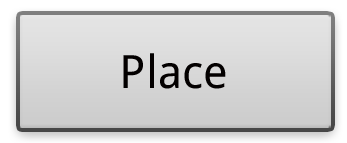
<style>
.page{position:relative;width:347px;height:143px}
.page>*{position:absolute;margin:0}
.t1{font:45.8px "DroidSans";color:#030000}
</style>
<div class="page">
<p class="t1" style="left:123px;top:53px;width:103px;height:36px">Place</p>
</div>
